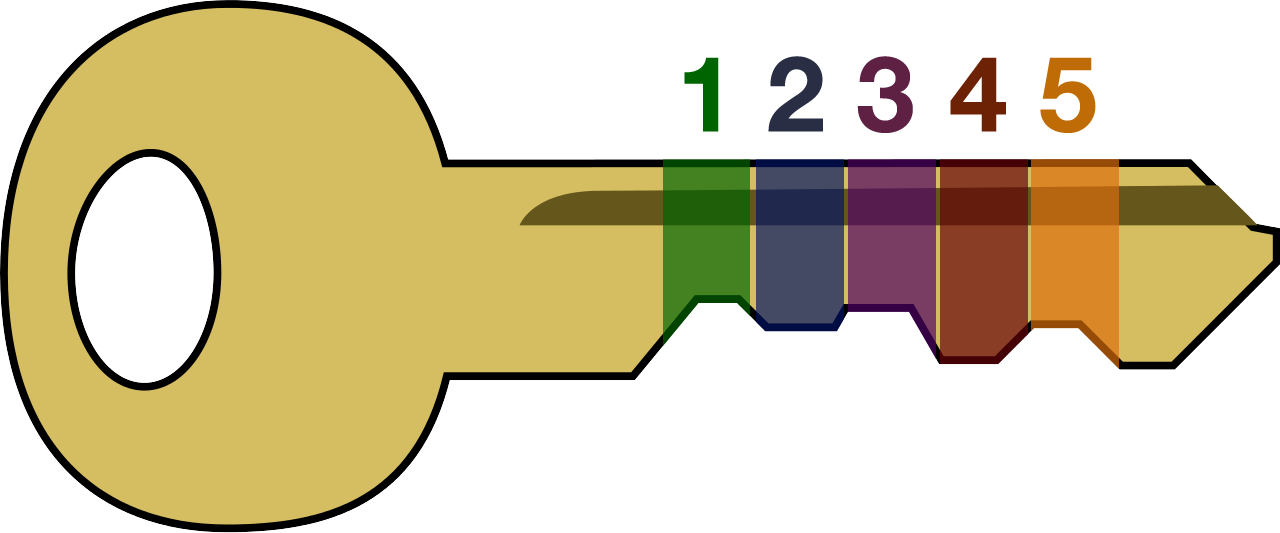
<style>
.page{position:relative;width:1280px;height:533px;background:#ffffff}
.page>*{position:absolute;margin:0}
.t1{font:105px "HelveticaNeue-Bold";letter-spacing:0.01em;color:#006400;text-transform:uppercase}
.t2{font:105px "HelveticaNeue-Bold";letter-spacing:0.01em;color:#292e44;text-transform:uppercase}
.t3{font:105px "HelveticaNeue-Bold";letter-spacing:0.01em;color:#5e2144;text-transform:uppercase}
.t4{font:105px "HelveticaNeue-Bold";letter-spacing:0.01em;color:#6d2105;text-transform:uppercase}
.t5{font:105px "HelveticaNeue-Bold";letter-spacing:0.01em;color:#bf6c07;text-transform:uppercase}
</style>
<div class="page">
<p class="t1" style="left:684px;top:56px;width:412px;height:77px">1 <span class="t2">2 </span><span class="t3">3 </span><span class="t4">4 </span><span class="t5">5</span></p>
</div>
